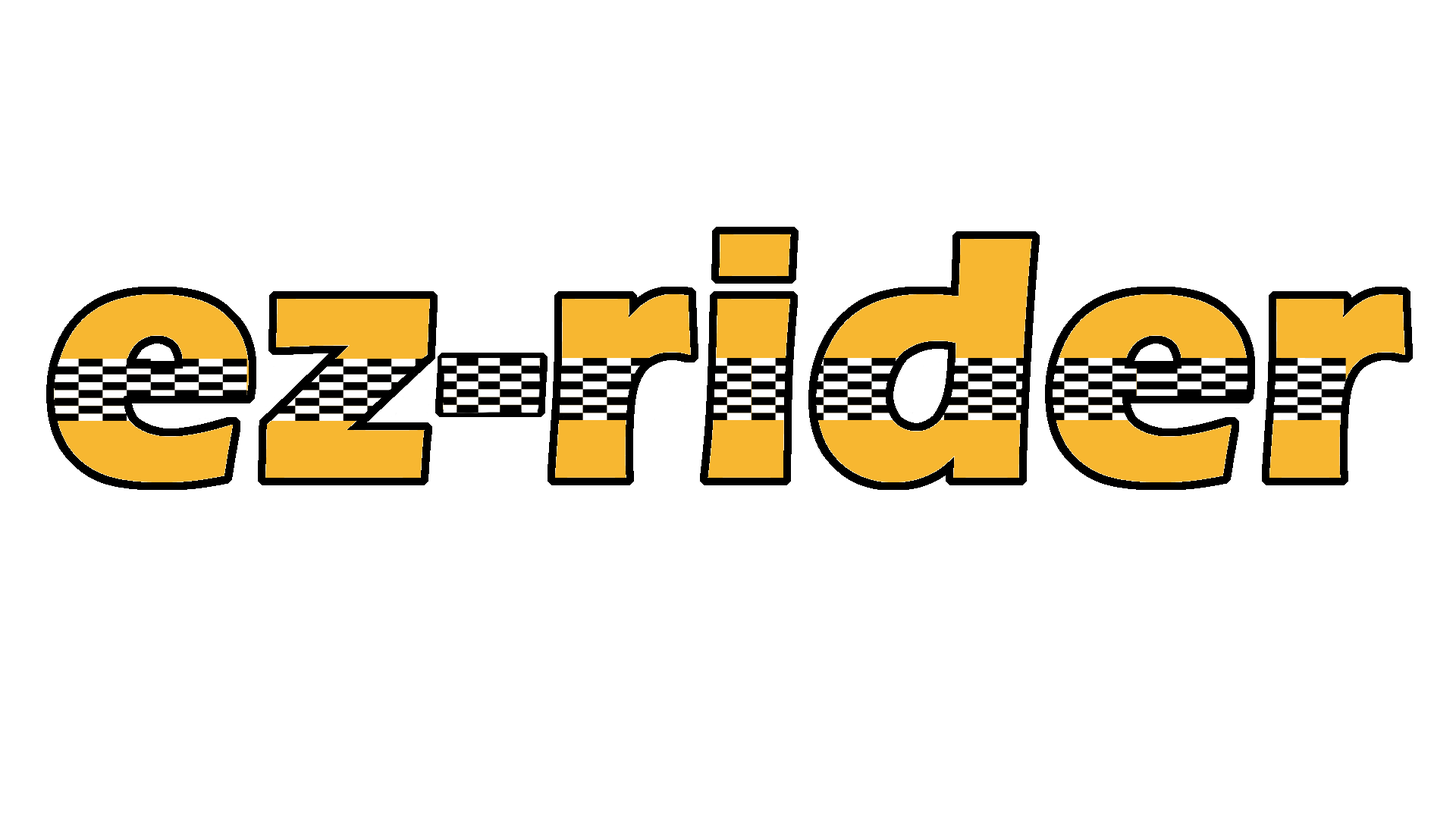
<style>
.page{position:relative;width:1456px;height:819px;background:#ffffff}
.page>*{position:absolute;margin:0}
.t1{font:358.7px "ErasITC-Bold";color:#f7b731}
</style>
<div class="page">
<p class="t1" style="left:54px;top:234px;width:1351px;height:248px">ez-rider</p>
</div>
